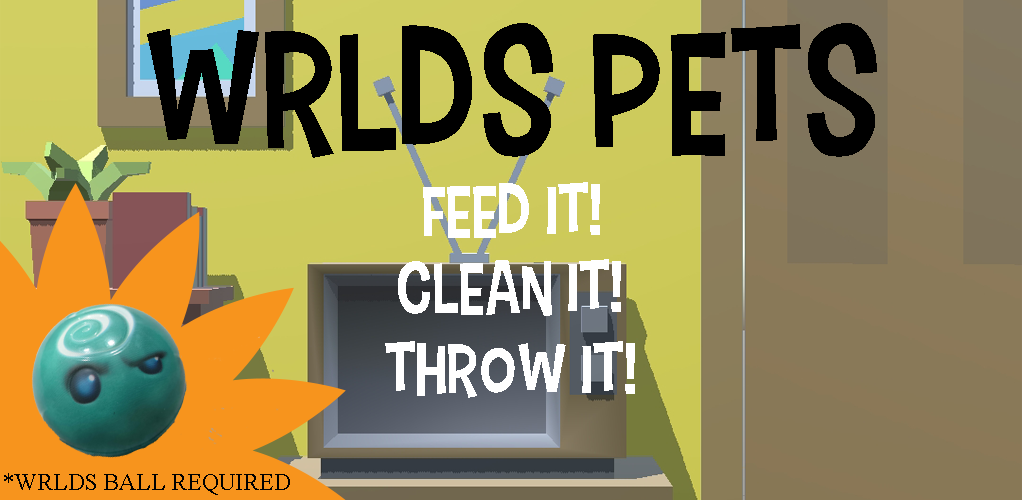
<style>
.page{position:relative;width:1024px;height:500px}
.page>*{position:absolute;margin:0}
.t1{font:170px "CartonSix";color:#000000}
.t2{font:72px "CartonSix";color:#ffffff}
.t3{font:24px "TimesNewRomanPSMT";color:#000000}
</style>
<div class="page">
<p class="t1" style="left:147px;top:23px;width:730px;height:135px">WRLDS PETS</p>
<p class="t2" style="left:423px;top:182px;width:177px;height:56px">Feed it!</p>
<p class="t2" style="left:398px;top:259px;width:223px;height:57px">CLEAN IT!</p>
<p class="t2" style="left:385px;top:341px;width:250px;height:57px">THROW IT!</p>
<p class="t3" style="left:4px;top:473px;width:286px;height:22px">*WRLDS BALL REQUIRED</p>
</div>
